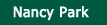
<style>
.page{position:relative;width:107px;height:25px;background:#005941}
.page>*{position:absolute;margin:0}
.t1{font:14px "Tahoma";letter-spacing:0.02em;color:#ffffff;font-weight:bold}
</style>
<div class="page">
<p class="t1" style="left:13px;top:6px;width:76px;height:15px">Nancy Park</p>
</div>
